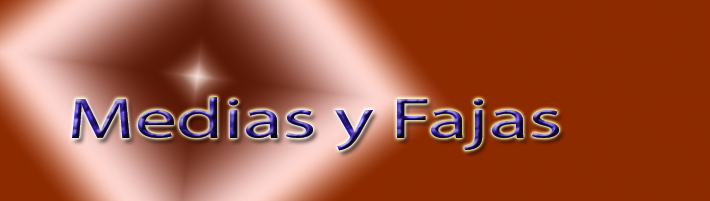
<style>
.page{position:relative;width:710px;height:201px}
.page>*{position:absolute;margin:0}
.t1{font:57.3px "MyriadPro-Regular";scale:1.46 1}
</style>
<div class="page">
<p class="t1" style="left:72px;top:97px;width:487px;height:54px">Medias y Fajas</p>
</div>
